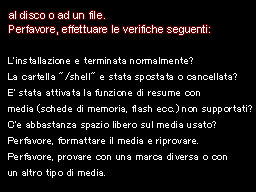
<style>
.page{position:relative;width:256px;height:192px;background:#000000}
.page>*{position:absolute;margin:0}
.t1{font:11px/14px "ArialMT";color:#ffffff}
.t2{font:11px/16px "MS-UIGothic";color:#ffffff}
</style>
<div class="page">
<p class="t1" style="left:9px;top:11px;width:201px;height:24px">al disco o ad un file.<br>Perfavore, effettuare le verifiche seguenti:</p>
<p class="t2" style="left:8px;top:57px;width:244px;height:121px">L'installazione è terminata normalmente?<br>La cartella "/shell" è stata spostata o cancellata?<br>E' stata attivata la funzione di resume con <br>media (schede di memoria, flash ecc.) non supportati?<br>C'è abbastanza spazio libero sul media usato?<br>Perfavore, formattare il media e riprovare.<br>Perfavore, provare con una marca diversa o con<br>un altro tipo di media.</p>
</div>
